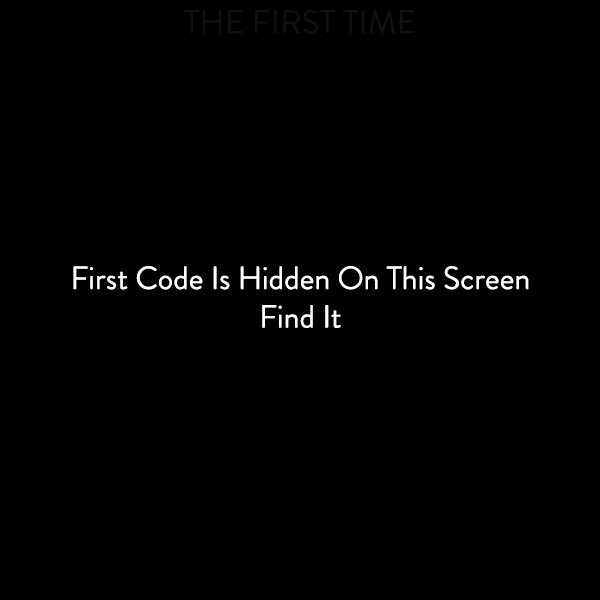
<style>
.page{position:relative;width:600px;height:600px;background:#000000}
.page>*{position:absolute;margin:0}
.t1{font:33.1px "BrandonGrotesque-Regular";color:#101010}
.t2{font:32.2px "BrandonGrotesque-Regular";color:#ffffff}
</style>
<div class="page">
<p class="t1" style="left:183px;top:9px;width:232px;height:25px">THE FIRST TIME</p>
<p class="t2" style="left:73px;top:266px;width:456px;height:62px;text-align:center">First Code Is Hidden On This Screen<br>Find It</p>
</div>
